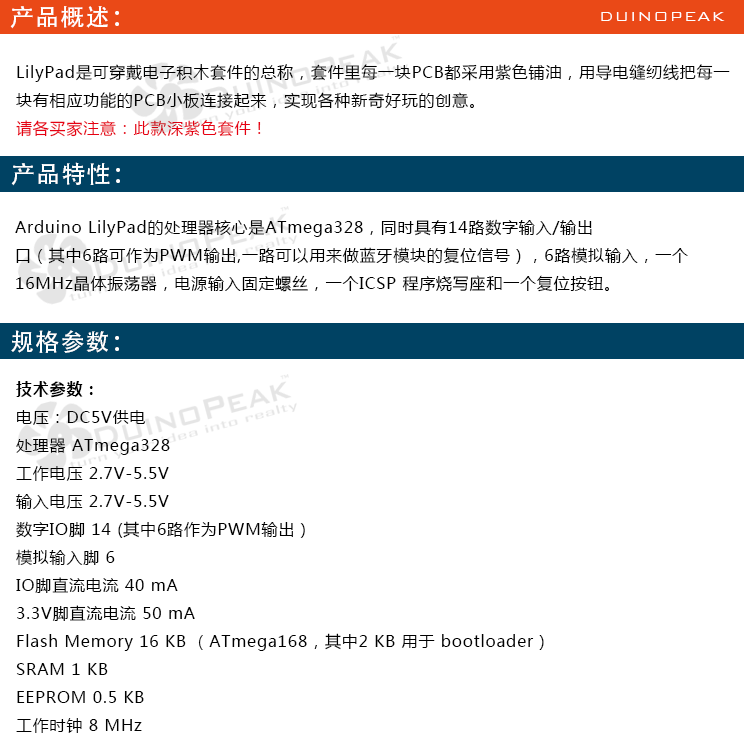
<style>
.page{position:relative;width:744px;height:755px;background:#ffffff}
.page>*{position:absolute;margin:0}
.t1{font:24px "AdobeHeitiStd-Regular";letter-spacing:0.05em;color:#ffffff}
.t2{font:18px "BankGothicBT-Light";letter-spacing:0.05em;color:#ffffff}
.t3{font:16px "MicrosoftYaHei";letter-spacing:0.05em;color:#000000}
.t4{font:16px "MicrosoftYaHei";letter-spacing:0.05em;color:#e60012}
.t5{font:16px "MicrosoftYaHei-Bold";letter-spacing:0.05em;color:#000000}
</style>
<div class="page">
<p class="t1" style="left:10px;top:6px;width:109px;height:23px">产品概述：</p>
<p class="t2" style="left:601px;top:12px;width:124px;height:9px">DUINOPEAK</p>
<p class="t3" style="left:16px;top:64px;width:714px;height:73px">LilyPad是可穿戴电子积木套件的总称，套件里每一块PCB都采用紫色铺油，用导电缝纫线把每一<br>块有相应功能的PCB小板连接起来，实现各种新奇好玩的创意。<br><span class="t4">请各买家注意：此款深紫色套件！</span></p>
<p class="t1" style="left:11px;top:162px;width:109px;height:24px">产品特性：</p>
<p class="t3" style="left:15px;top:219px;width:673px;height:73px">Arduino LilyPad的处理器核心是ATmega328，同时具有14路数字输入/输出<br>口（其中6路可作为PWM输出,一路可以用来做蓝牙模块的复位信号），6路模拟输入，一个<br>16MHz晶体振荡器，电源输入固定螺丝，一个ICSP 程序烧写座和一个复位按钮。</p>
<p class="t1" style="left:11px;top:330px;width:108px;height:23px">规格参数：</p>
<p class="t3" style="left:16px;top:381px;width:528px;height:352px"><span class="t5">技术参数：<br></span>电压：DC5V供电<br>处理器 ATmega328<br>工作电压 2.7V-5.5V<br>输入电压 2.7V-5.5V<br>数字IO脚 14 (其中6路作为PWM输出）<br>模拟输入脚 6<br>IO脚直流电流 40 mA<br>3.3V脚直流电流 50 mA<br>Flash Memory 16 KB （ATmega168，其中2 KB 用于 bootloader）<br>SRAM 1 KB<br>EEPROM 0.5 KB<br>工作时钟 8 MHz</p>
</div>
